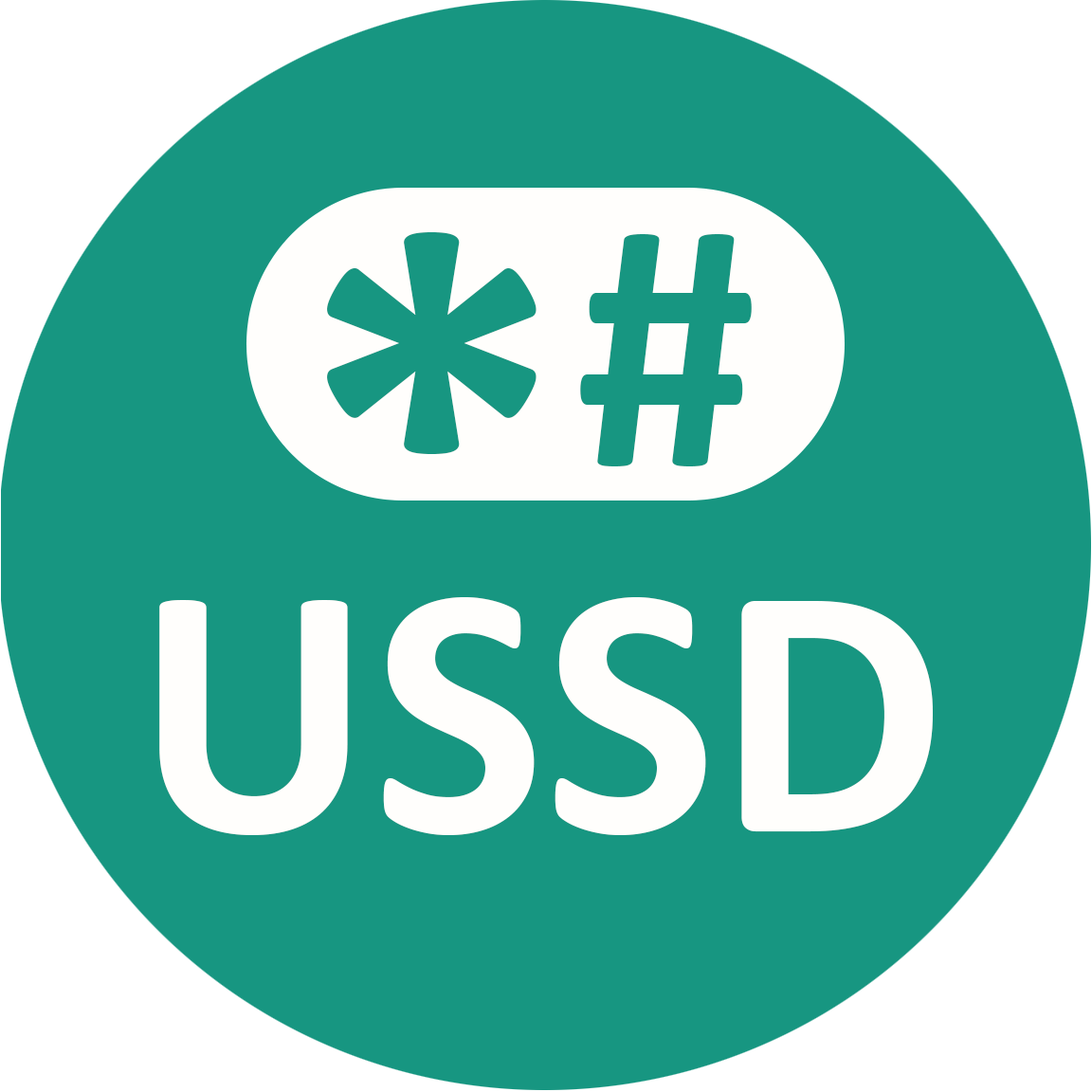
<style>
.page{position:relative;width:1092px;height:1092px;background:#179681}
.page>*{position:absolute;margin:0}
.t1{font:576.3px "Calibri-Bold";color:#179681}
.t2{font:364px "Calibri-Bold";color:#179681}
.t3{font:364px "Calibri-Bold";color:#fffefc}
</style>
<div class="page">
<p class="t1" style="left:327px;top:232px;width:210px;height:222px">*</p>
<p class="t2" style="left:580px;top:234px;width:172px;height:232px">#</p>
<p class="t3" style="left:159px;top:597px;width:774px;height:238px">USSD</p>
</div>
